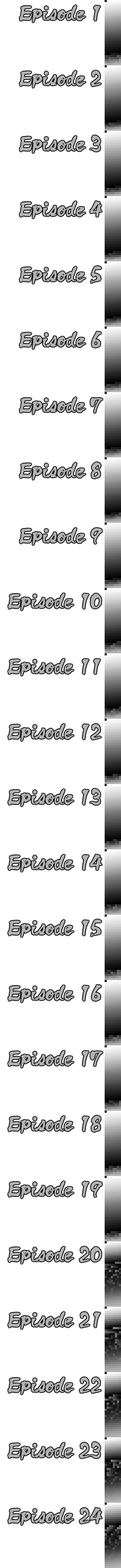
<style>
.page{position:relative;width:121px;height:1568px;background:#ffffff}
.page>*{position:absolute;margin:0}
.t1{font:19.6px/65.3px "SamuraiStd-R";letter-spacing:-0.025em;color:#b3b3b3;font-weight:bold;scale:0.9 1}
</style>
<div class="page">
<p class="t1" style="left:8px;top:5px;width:95px;height:1520px;text-align:right">Episode 1<br>Episode 2<br>Episode 3<br>Episode 4<br>Episode 5<br>Episode 6<br>Episode 7<br>Episode 8<br>Episode 9<br>Episode 10<br>Episode 11<br>Episode 12<br>Episode 13<br>Episode 14<br>Episode 15<br>Episode 16<br>Episode 17<br>Episode 18<br>Episode 19<br>Episode 20<br>Episode 21<br>Episode 22<br>Episode 23<br>Episode 24</p>
</div>
